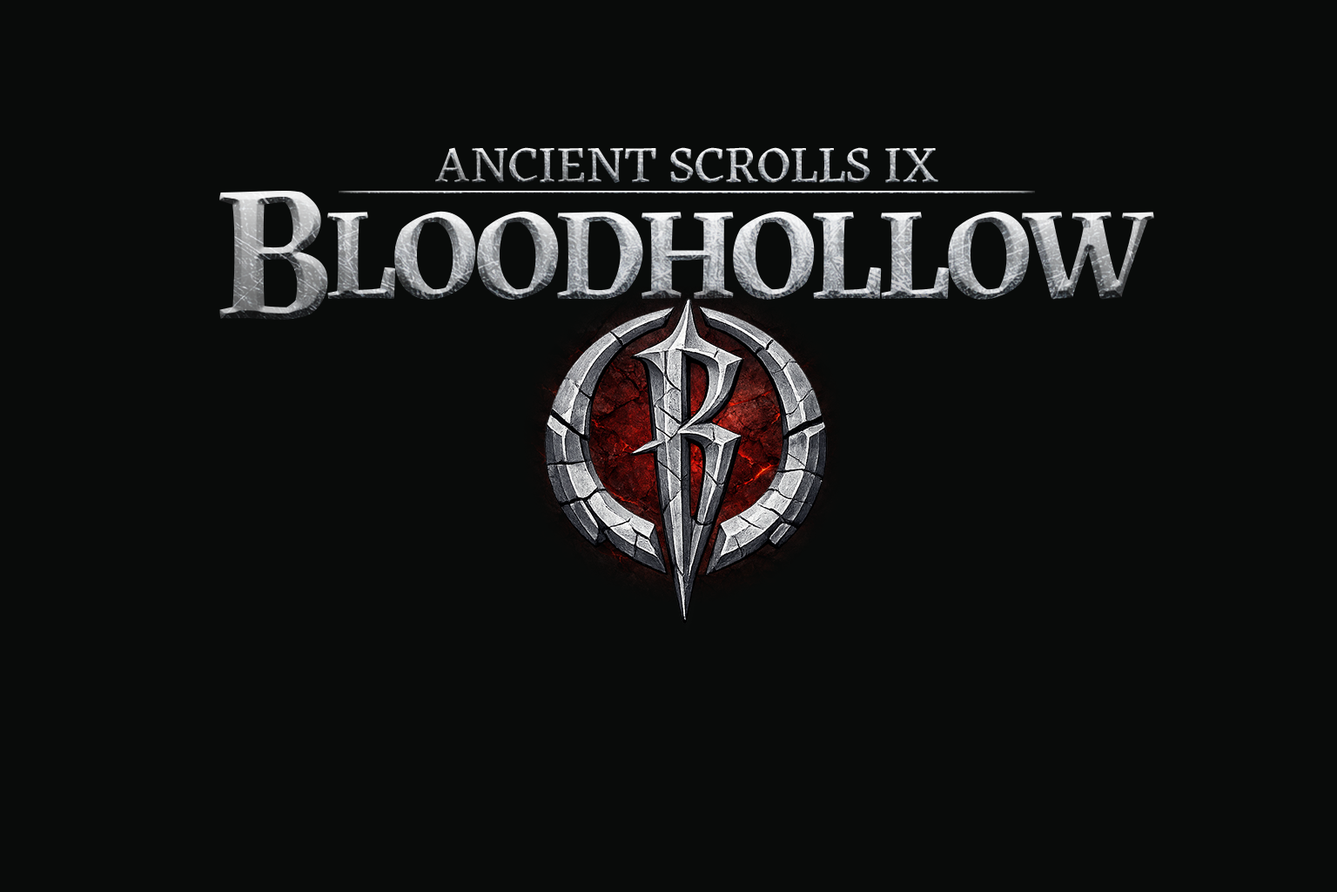
<style>
.page{position:relative;width:1337px;height:892px;background:#090b0a}
.page>*{position:absolute;margin:0}
.t1{font:52.2px "Labrada-Medium"}
.t2{font:191.6px "Labrada-Bold";letter-spacing:-0.04em}
.t3{font:130.6px "Labrada-Bold";letter-spacing:-0.04em}
</style>
<div class="page">
<p class="t1" style="left:435px;top:147px;width:504px;height:37px">ANCIENT SCROLLS IX</p>
<p class="t2" style="left:219px;top:191px;width:109px;height:129px">B</p>
<p class="t3" style="left:327px;top:211px;width:828px;height:89px">LOODHOLLOW</p>
</div>
